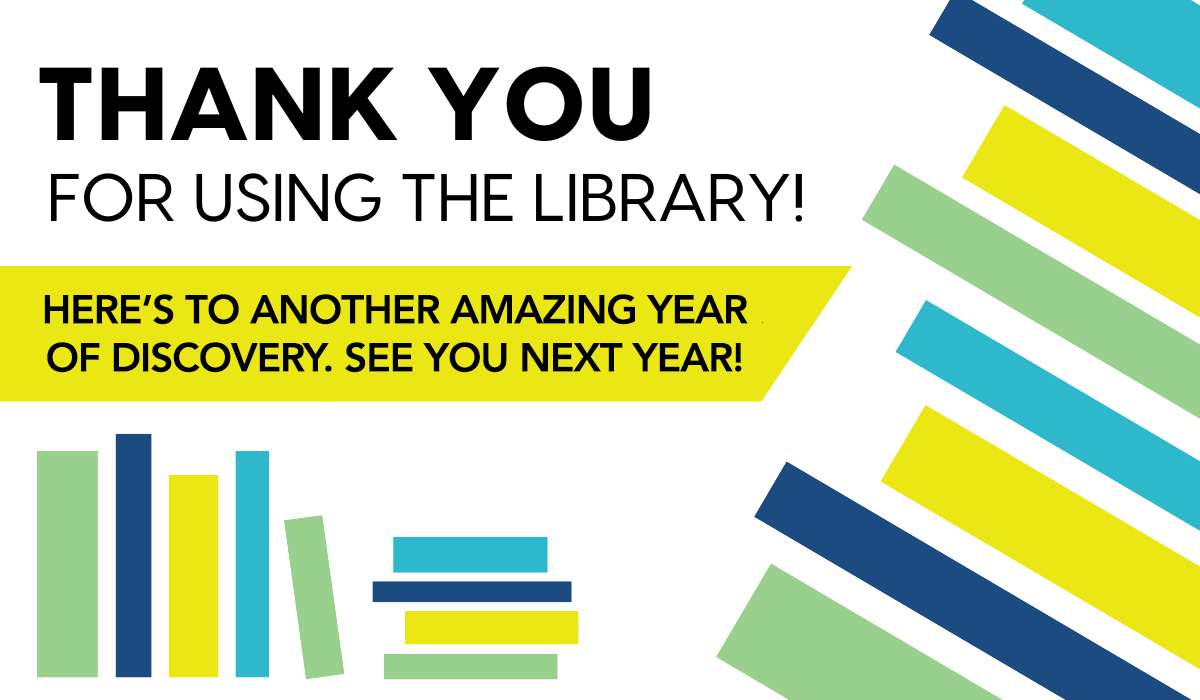
<style>
.page{position:relative;width:1200px;height:700px;background:#ffffff}
.page>*{position:absolute;margin:0}
.t1{font:40px "Avenir-Heavy";letter-spacing:-0.025em;color:#000000}
</style>
<div class="page">
<p class="t1" style="left:44px;top:294px;width:704px;height:79px;text-align:center">HERE’S TO ANOTHER AMAZING YEAR<br>OF DISCOVERY. SEE YOU NEXT YEAR!</p>
</div>
